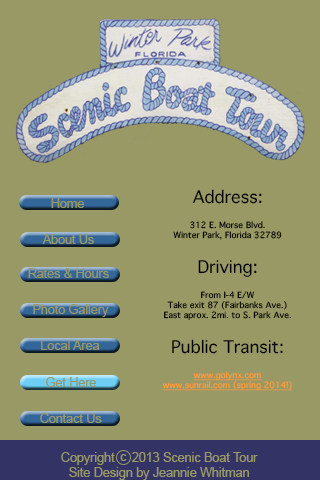
<style>
.page{position:relative;width:320px;height:480px;background:#999966}
.page>*{position:absolute;margin:0}
.t1{font:12.5px "ArialMT";color:#999966}
.t2{font:8.3px "Thonburi";color:#000000}
.t3{font:16.7px "Thonburi";color:#000000}
.t4{font:8.3px "Thonburi";color:#ff9933;text-decoration:underline}
</style>
<div class="page">
<p class="t1" style="left:51px;top:198px;width:33px;height:10px">Home</p>
<p class="t2" style="left:162px;top:189px;width:131px;height:202px;text-align:center"><span class="t3">Address:<br><br></span>312 E. Morse Blvd.<br>Winter Park, Florida 32789<br><br><span class="t3">Driving:<br><br></span>From I-4 E/W<br>Take exit 87 (Fairbanks Ave.)<br>East aprox. 2mi. to S. Park Ave.<br><br><span class="t3">Public Transit:<br><br></span><span class="t4">www.golynx.com<br>www.sunrail.com (spring 2014!)</span></p>
<p class="t1" style="left:42px;top:234px;width:52px;height:10px">About Us</p>
<p class="t1" style="left:28px;top:268px;width:81px;height:10px">Rates &amp; Hours</p>
<p class="t1" style="left:33px;top:304px;width:76px;height:13px">Photo Gallery</p>
<p class="t1" style="left:41px;top:340px;width:59px;height:10px">Local Area</p>
<p class="t1" style="left:46px;top:377px;width:50px;height:10px">Get Here</p>
<p class="t1" style="left:40px;top:413px;width:62px;height:10px">Contact Us</p>
<p class="t1" style="left:61px;top:452px;width:197px;height:28px;text-align:center">Copyright     2013 Scenic Boat Tour<br>Site Design by Jeannie Whitman</p>
<p class="t1" style="left:120px;top:454px;width:7px;height:7px">c</p>
</div>
